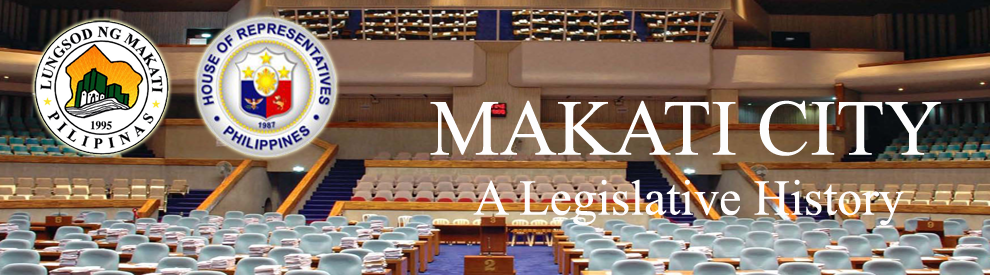
<style>
.page{position:relative;width:990px;height:275px}
.page>*{position:absolute;margin:0}
.t1{font:50px "TimesNewRomanPSMT";color:#fdfcfc}
.t2{font:79.2px "TimesNewRomanPSMT";color:#fdfdfd}
</style>
<div class="page">
<p class="t1" style="left:430px;top:100px;width:511px;height:126px;text-align:center"><span class="t2">MAKATI CITY<br></span>A Legislative History</p>
</div>
